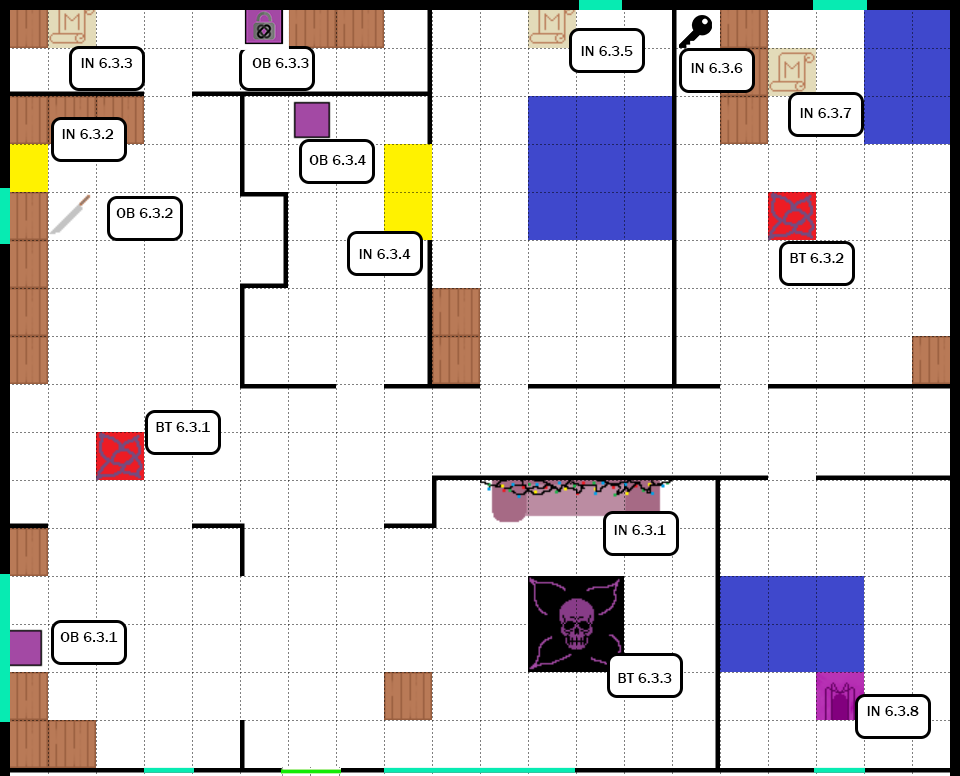
<style>
.page{position:relative;width:960px;height:776px;background:#ffffff}
.page>*{position:absolute;margin:0}
.t1{font:15.3px "FranklinGothic-Medium";color:#000000}
</style>
<div class="page">
<p class="t1" style="left:581px;top:46px;width:52px;height:10px">IN 6.3.5</p>
<p class="t1" style="left:81px;top:58px;width:52px;height:10px">IN 6.3.3</p>
<p class="t1" style="left:252px;top:58px;width:57px;height:10px">OB 6.3.3</p>
<p class="t1" style="left:691px;top:63px;width:52px;height:10px">IN 6.3.6</p>
<p class="t1" style="left:800px;top:108px;width:52px;height:10px">IN 6.3.7</p>
<p class="t1" style="left:62px;top:129px;width:52px;height:10px">IN 6.3.2</p>
<p class="t1" style="left:309px;top:155px;width:57px;height:10px">OB 6.3.4</p>
<p class="t1" style="left:116px;top:208px;width:57px;height:10px">OB 6.3.2</p>
<p class="t1" style="left:359px;top:249px;width:52px;height:10px">IN 6.3.4</p>
<p class="t1" style="left:790px;top:253px;width:54px;height:10px">BT 6.3.2</p>
<p class="t1" style="left:156px;top:422px;width:54px;height:10px">BT 6.3.1</p>
<p class="t1" style="left:614px;top:525px;width:52px;height:10px">IN 6.3.1</p>
<p class="t1" style="left:60px;top:632px;width:58px;height:10px">OB 6.3.1</p>
<p class="t1" style="left:618px;top:673px;width:54px;height:10px">BT 6.3.3</p>
<p class="t1" style="left:867px;top:706px;width:52px;height:10px">IN 6.3.8</p>
</div>
